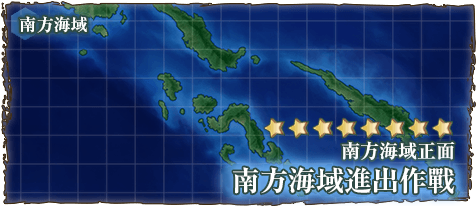
<style>
.page{position:relative;width:476px;height:206px}
.page>*{position:absolute;margin:0}
.t1{font:17px "RyuminPr6N-ExBold";color:#ffffff}
.t2{font:19px "RyuminPro-ExBold";color:#ffffff}
.t3{font:28px "RyuminPro-ExBold";color:#ffffff}
</style>
<div class="page">
<p class="t1" style="left:19px;top:16px;width:68px;height:17px">南方海域</p>
<p class="t2" style="left:341px;top:141px;width:114px;height:19px">南方海域正面</p>
<p class="t3" style="left:233px;top:167px;width:222px;height:27px">南方海域進出作戰</p>
</div>
